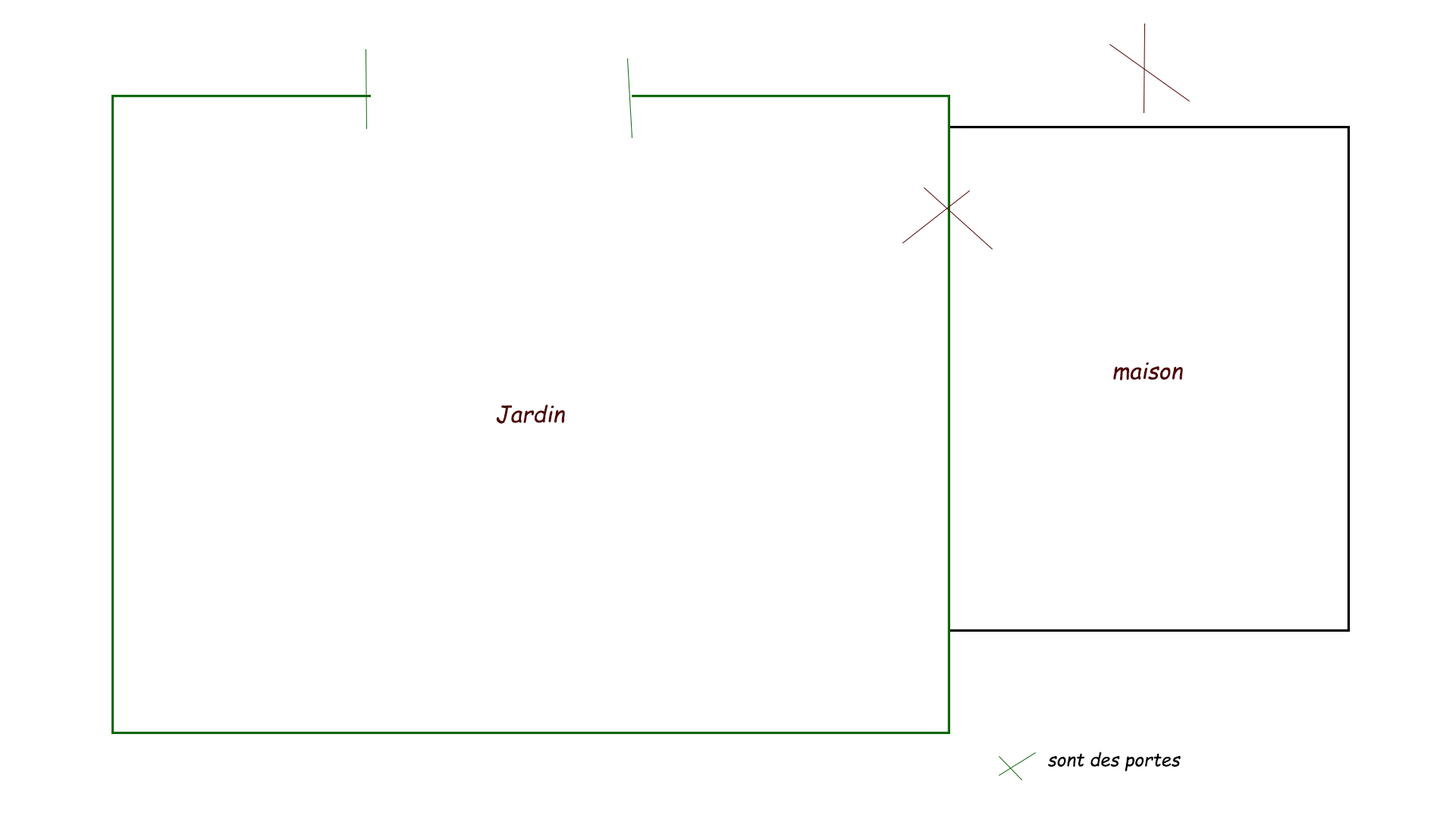
<style>
.page{position:relative;width:1456px;height:819px;background:#ffffff}
.page>*{position:absolute;margin:0}
.t1{font:22.7px "ComicSansMS-Italic";color:#4f0404}
.t2{font:18.2px "ComicSansMS-Italic";color:#000000}
</style>
<div class="page">
<p class="t1" style="left:1113px;top:362px;width:70px;height:19px">maison</p>
<p class="t1" style="left:496px;top:404px;width:69px;height:20px">Jardin</p>
<p class="t2" style="left:1048px;top:751px;width:133px;height:21px">sont des portes</p>
</div>
